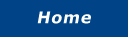
<style>
.page{position:relative;width:128px;height:37px;background:#004387}
.page>*{position:absolute;margin:0}
.t1{font:16px "Verdana-Bold";letter-spacing:0.05em;color:#ffffff;font-style:italic}
</style>
<div class="page">
<p class="t1" style="left:37px;top:11px;width:54px;height:13px">Home</p>
</div>
